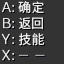
<style>
.page{position:relative;width:64px;height:64px;background:#333333}
.page>*{position:absolute;margin:0}
.t1{font:13px/16px "SourceHanSansSC-Regular";color:#e8e8e8}
</style>
<div class="page">
<p class="t1" style="left:18px;top:1px;width:27px;height:45px">确定<br>返回<br>技能</p>
</div>
